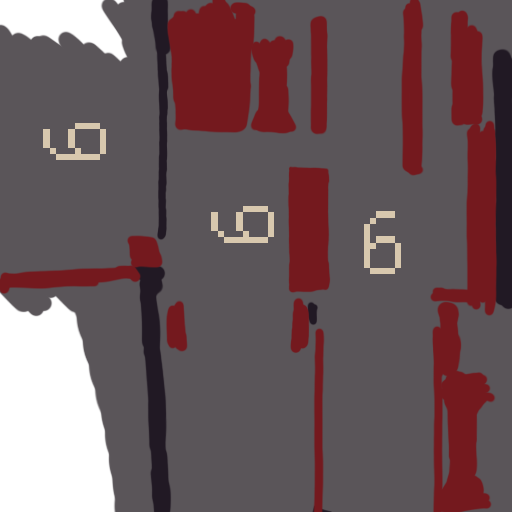
<style>
.page{position:relative;width:512px;height:512px;background:#5a5559}
.page>*{position:absolute;margin:0}
.t1{font:100px "Courier";color:#d8c8ae}
</style>
<div class="page">
<p class="t1" style="left:43px;top:123px;width:63px;height:37px;rotate:-90deg">6</p>
<p class="t1" style="left:211px;top:206px;width:63px;height:37px;rotate:-90deg">6</p>
<p class="t1" style="left:364px;top:211px;width:37px;height:63px">6</p>
</div>
